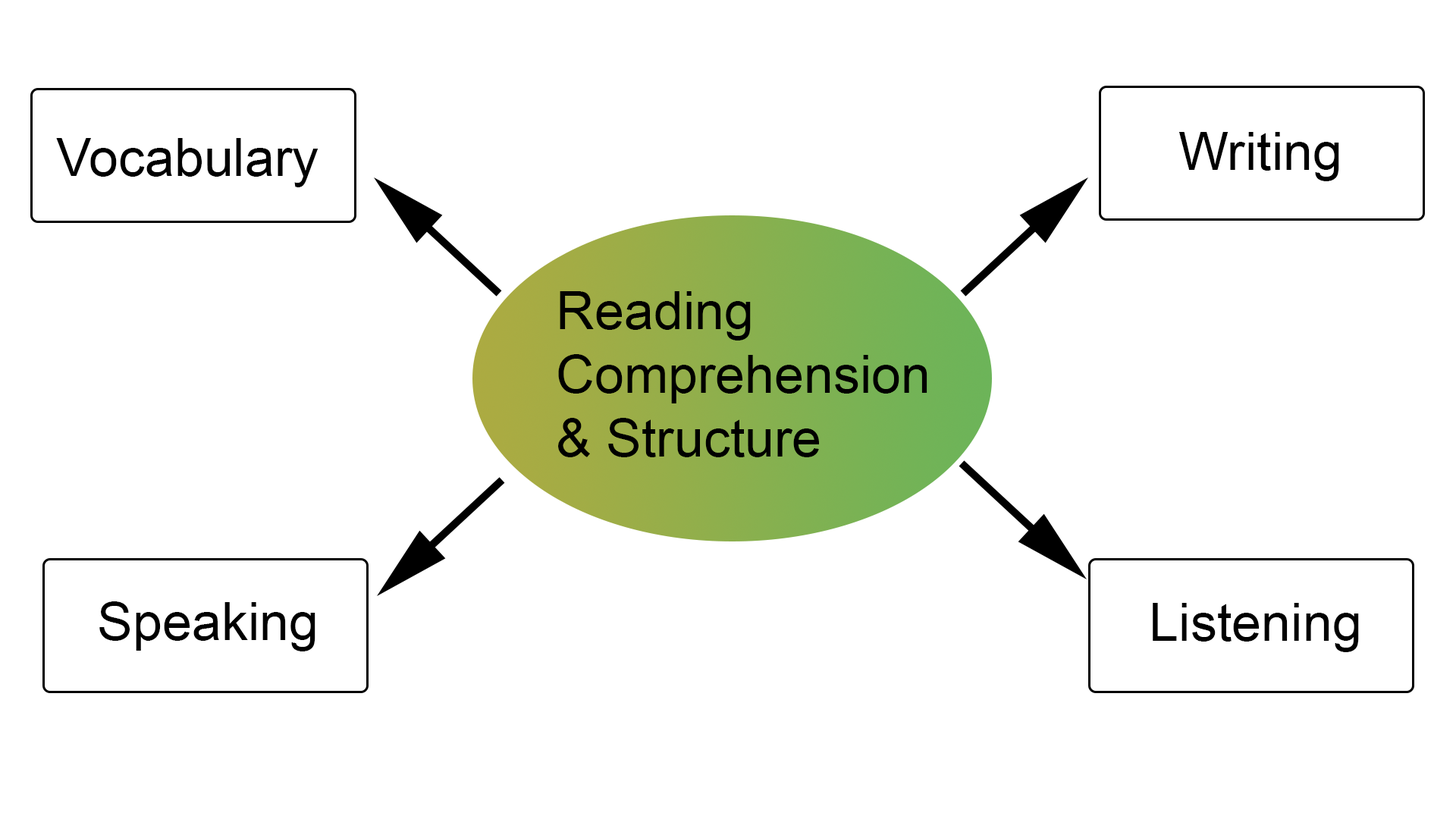
<style>
.page{position:relative;width:1456px;height:819px;background:#ffffff}
.page>*{position:absolute;margin:0}
.t1{font:53.1px "ArialMT";color:#000000}
</style>
<div class="page">
<p class="t1" style="left:1178px;top:132px;width:161px;height:49px">Writing</p>
<p class="t1" style="left:56px;top:138px;width:262px;height:49px">Vocabulary</p>
<p class="t1" style="left:558px;top:291px;width:369px;height:166px">Reading <br>Comprehension<br>&amp; Structure</p>
<p class="t1" style="left:99px;top:601px;width:216px;height:50px">Speaking</p>
<p class="t1" style="left:1153px;top:603px;width:206px;height:49px">Listening</p>
</div>
